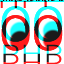
<style>
.page{position:relative;width:64px;height:64px;background:#ffffff}
.page>*{position:absolute;margin:0}
.t1{font:48px "Roboto-Light"}
.t2{font:24px "Roboto-Light";letter-spacing:0.05em;scale:1.26 1}
</style>
<div class="page">
<p class="t1" style="left:1px;top:4px;width:61px;height:36px">OO</p>
<p class="t1" style="left:1px;top:4px;width:61px;height:36px">OO</p>
<p class="t1" style="left:2px;top:4px;width:61px;height:36px">OO</p>
<p class="t2" style="left:3px;top:42px;width:59px;height:18px">PHP</p>
</div>
